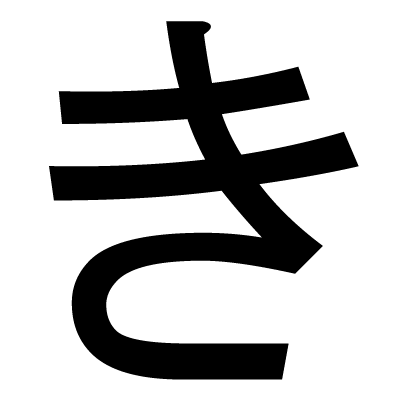
<style>
.page{position:relative;width:400px;height:400px;background:#ffffff}
.page>*{position:absolute;margin:0}
.t1{font:416.7px "MS-PGothic";color:#000000}
</style>
<div class="page">
<p class="t1" style="left:49px;top:21px;width:310px;height:359px">き</p>
</div>
